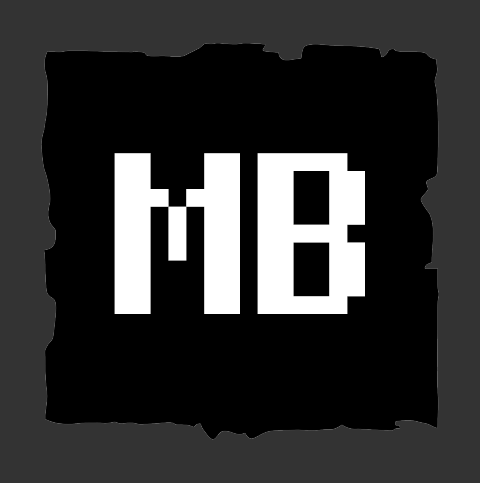
<style>
.page{position:relative;width:480px;height:483px;background:#000000}
.page>*{position:absolute;margin:0}
.t1{font:228.7px "Fixedsys";color:#ffffff}
</style>
<div class="page">
<p class="t1" style="left:114px;top:153px;width:251px;height:161px">MB</p>
</div>
